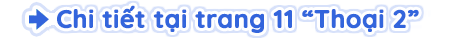
<style>
.page{position:relative;width:464px;height:41px;background:#ffffff}
.page>*{position:absolute;margin:0}
.t1{font:25px "Quicksand-Bold";color:#3264dc;font-weight:bold}
</style>
<div class="page">
<p class="t1" style="left:57px;top:5px;width:362px;height:28px">Chi tiết tại trang 11 “Thoại 2”</p>
</div>
